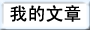
<style>
.page{position:relative;width:90px;height:30px;background:#ffffff}
.page>*{position:absolute;margin:0}
.t1{font:18px "SimHei";color:#000000}
</style>
<div class="page">
<p class="t1" style="left:10px;top:5px;width:71px;height:17px">我的文章</p>
</div>
